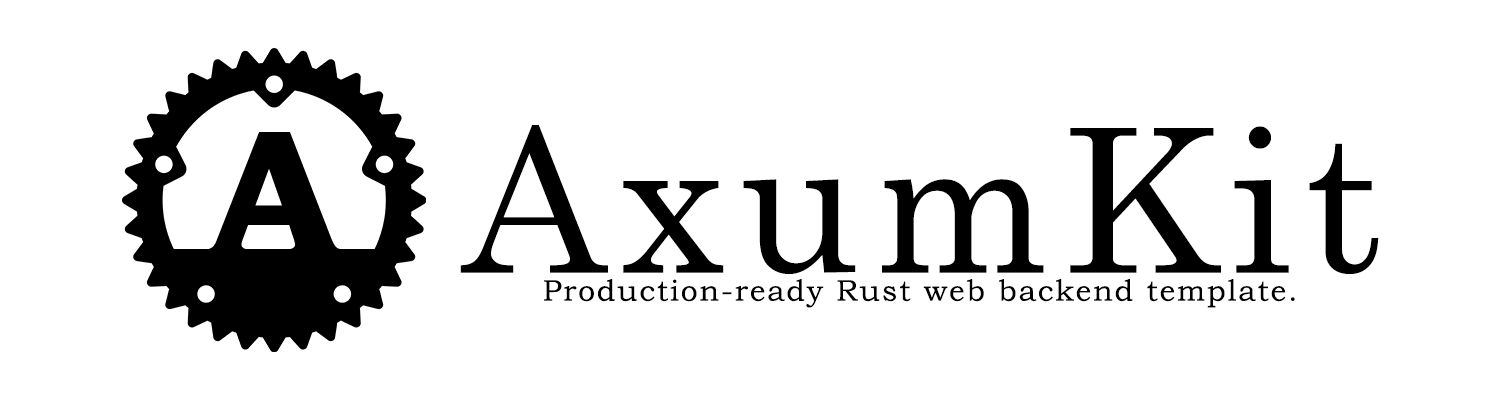
<style>
.page{position:relative;width:1500px;height:400px;background:#ffffff}
.page>*{position:absolute;margin:0}
.t1{font:200px "CenturySchoolbook";letter-spacing:0.06em;color:#000000}
.t2{font:30px "BookmanOldStyle";letter-spacing:0.06em;color:#000000}
</style>
<div class="page">
<p class="t1" style="left:460px;top:125px;width:919px;height:149px">AxumKit</p>
<p class="t2" style="left:544px;top:279px;width:751px;height:29px">Production-ready Rust web backend template.</p>
</div>
